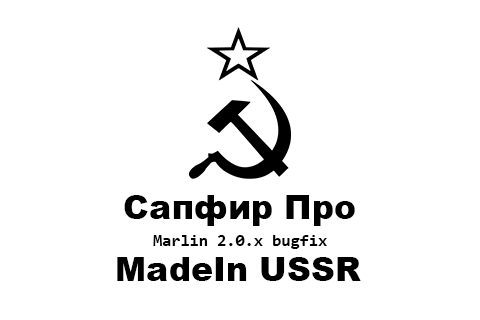
<style>
.page{position:relative;width:480px;height:320px;background:#ffffff}
.page>*{position:absolute;margin:0}
.t1{font:33.3px "Arial-Black";color:#000000}
.t2{font:16.7px "Consolas-Bold";color:#000000}
</style>
<div class="page">
<p class="t1" style="left:124px;top:195px;width:231px;height:31px">Сапфир Про</p>
<p class="t2" style="left:153px;top:235px;width:174px;height:14px">Marlin 2.0.x bugfix</p>
<p class="t1" style="left:117px;top:257px;width:244px;height:24px">MadeIn USSR</p>
</div>
